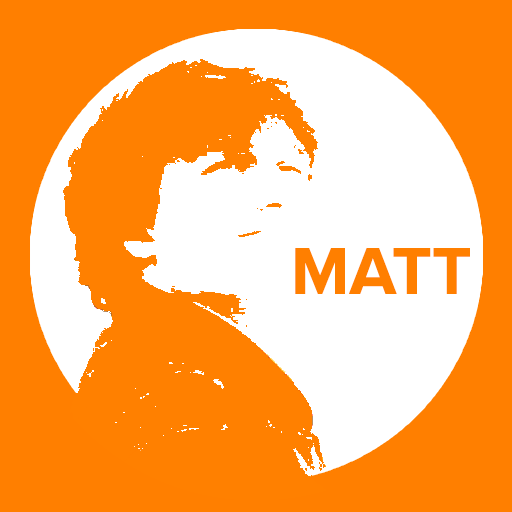
<style>
.page{position:relative;width:512px;height:512px;background:#ff7f00}
.page>*{position:absolute;margin:0}
.t1{font:68.5px "ProximaNova-Bold";color:#ff7f00}
</style>
<div class="page">
<p class="t1" style="left:295px;top:248px;width:175px;height:46px">MATT</p>
</div>
